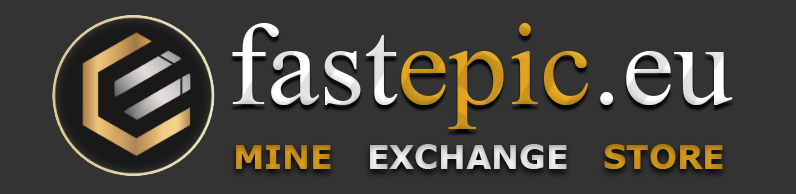
<style>
.page{position:relative;width:796px;height:194px;background:#333333}
.page>*{position:absolute;margin:0}
.t1{font:117.2px "TimesNewRomanPSMT"}
.t2{font:33px "Verdana-Bold"}
</style>
<div class="page">
<p class="t1" style="left:232px;top:23px;width:501px;height:106px">fastepic.eu</p>
<p class="t2" style="left:236px;top:144px;width:487px;height:25px">MINE   EXCHANGE   STORE</p>
</div>
